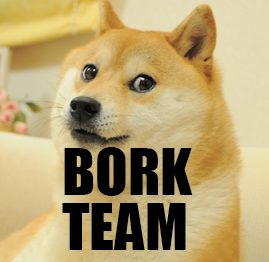
<style>
.page{position:relative;width:269px;height:262px}
.page>*{position:absolute;margin:0}
.t1{font:60px "Impact";color:#000000}
</style>
<div class="page">
<p class="t1" style="left:64px;top:147px;width:129px;height:49px">BORK</p>
<p class="t1" style="left:62px;top:203px;width:124px;height:47px">TEAM</p>
</div>
